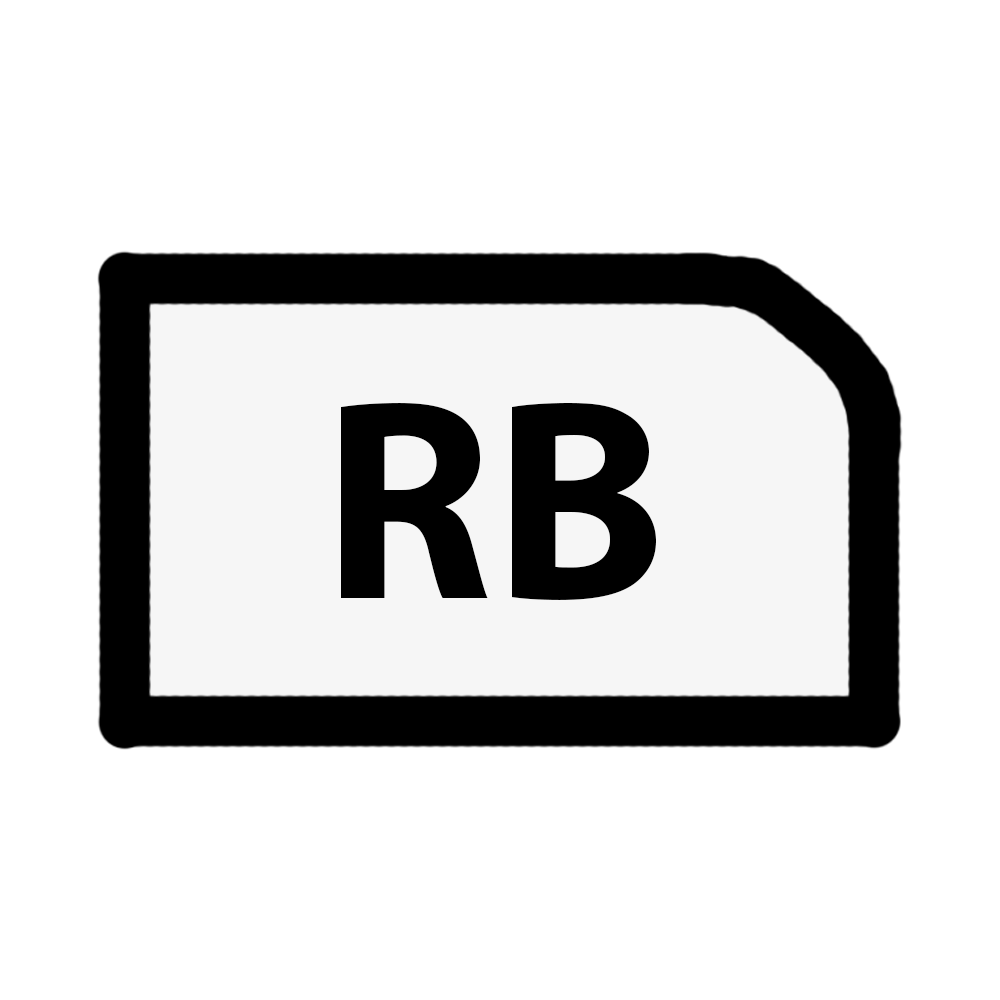
<style>
.page{position:relative;width:1000px;height:1000px;background:#ffffff}
.page>*{position:absolute;margin:0}
.t1{font:288.3px "MyriadPro-Bold";color:#000000}
</style>
<div class="page">
<p class="t1" style="left:341px;top:403px;width:315px;height:197px">RB</p>
</div>
